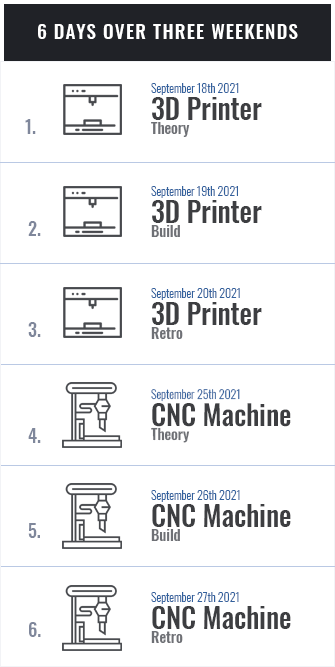
<style>
.page{position:relative;width:335px;height:667px;background:#ffffff}
.page>*{position:absolute;margin:0}
.t1{font:19px "Oswald-Medium";letter-spacing:0.066em;color:#ffffff;text-transform:uppercase}
.t2{font:12px/28px "Oswald-Light";letter-spacing:-0.007em;color:#33619d}
.t3{font:28px/27px "Oswald-Medium";letter-spacing:-0.007em;color:#3d3e41}
.t4{font:15px/14px "Oswald-Medium";letter-spacing:-0.007em;color:#6e7075}
.t5{font:18px "Oswald-Medium";color:#7f879b;text-transform:uppercase}
</style>
<div class="page">
<p class="t1" style="left:38px;top:24px;width:260px;height:15px">6 Days over three weekends</p>
<p class="t2" style="left:151px;top:83px;width:111px;height:54px">September 18th 2021<br><span class="t3">3D Printer <br></span><span class="t4">Theory</span></p>
<p class="t5" style="left:25px;top:119px;width:11px;height:15px">1.</p>
<p class="t2" style="left:151px;top:186px;width:111px;height:51px">September 19th 2021<br><span class="t3">3D Printer <br></span><span class="t4">Build</span></p>
<p class="t5" style="left:28px;top:221px;width:13px;height:15px">2.</p>
<p class="t2" style="left:151px;top:288px;width:111px;height:51px">September 20th 2021<br><span class="t3">3D Printer <br></span><span class="t4">Retro</span></p>
<p class="t5" style="left:28px;top:322px;width:13px;height:15px">3.</p>
<p class="t2" style="left:151px;top:389px;width:140px;height:54px">September 25th 2021<br><span class="t3">CNC Machine<br></span><span class="t4">Theory</span></p>
<p class="t5" style="left:28px;top:428px;width:13px;height:15px">4.</p>
<p class="t2" style="left:151px;top:490px;width:140px;height:51px">September 26th 2021<br><span class="t3">CNC Machine<br></span><span class="t4">Build</span></p>
<p class="t5" style="left:28px;top:523px;width:12px;height:15px">5.</p>
<p class="t2" style="left:151px;top:592px;width:140px;height:51px">September 27th 2021<br><span class="t3">CNC Machine <br></span><span class="t4">Retro</span></p>
<p class="t5" style="left:29px;top:622px;width:12px;height:15px">6.</p>
</div>
